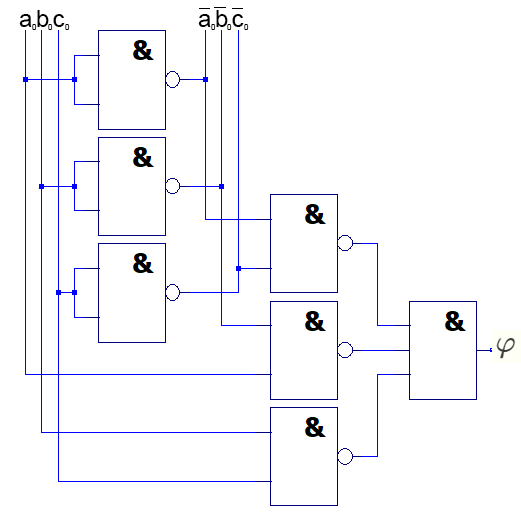
<style>
.page{position:relative;width:521px;height:517px;background:#ffffff}
.page>*{position:absolute;margin:0}
.t1{font:24px "ArialMT";color:#000000}
.t2{font:8px "ArialMT";color:#000000}
</style>
<div class="page">
<p class="t1" style="left:19px;top:14px;width:13px;height:13px">a</p>
<p class="t1" style="left:37px;top:10px;width:12px;height:17px">b</p>
<p class="t1" style="left:53px;top:14px;width:12px;height:13px">c</p>
<p class="t1" style="left:198px;top:14px;width:13px;height:13px">a</p>
<p class="t1" style="left:216px;top:10px;width:12px;height:17px">b</p>
<p class="t1" style="left:232px;top:14px;width:12px;height:13px">c</p>
<p class="t2" style="left:32px;top:24px;width:5px;height:6px">0</p>
<p class="t2" style="left:48px;top:24px;width:5px;height:6px">0</p>
<p class="t2" style="left:65px;top:24px;width:5px;height:6px">0</p>
<p class="t2" style="left:211px;top:24px;width:5px;height:6px">0</p>
<p class="t2" style="left:227px;top:24px;width:5px;height:6px">0</p>
<p class="t2" style="left:244px;top:24px;width:5px;height:6px">0</p>
</div>
